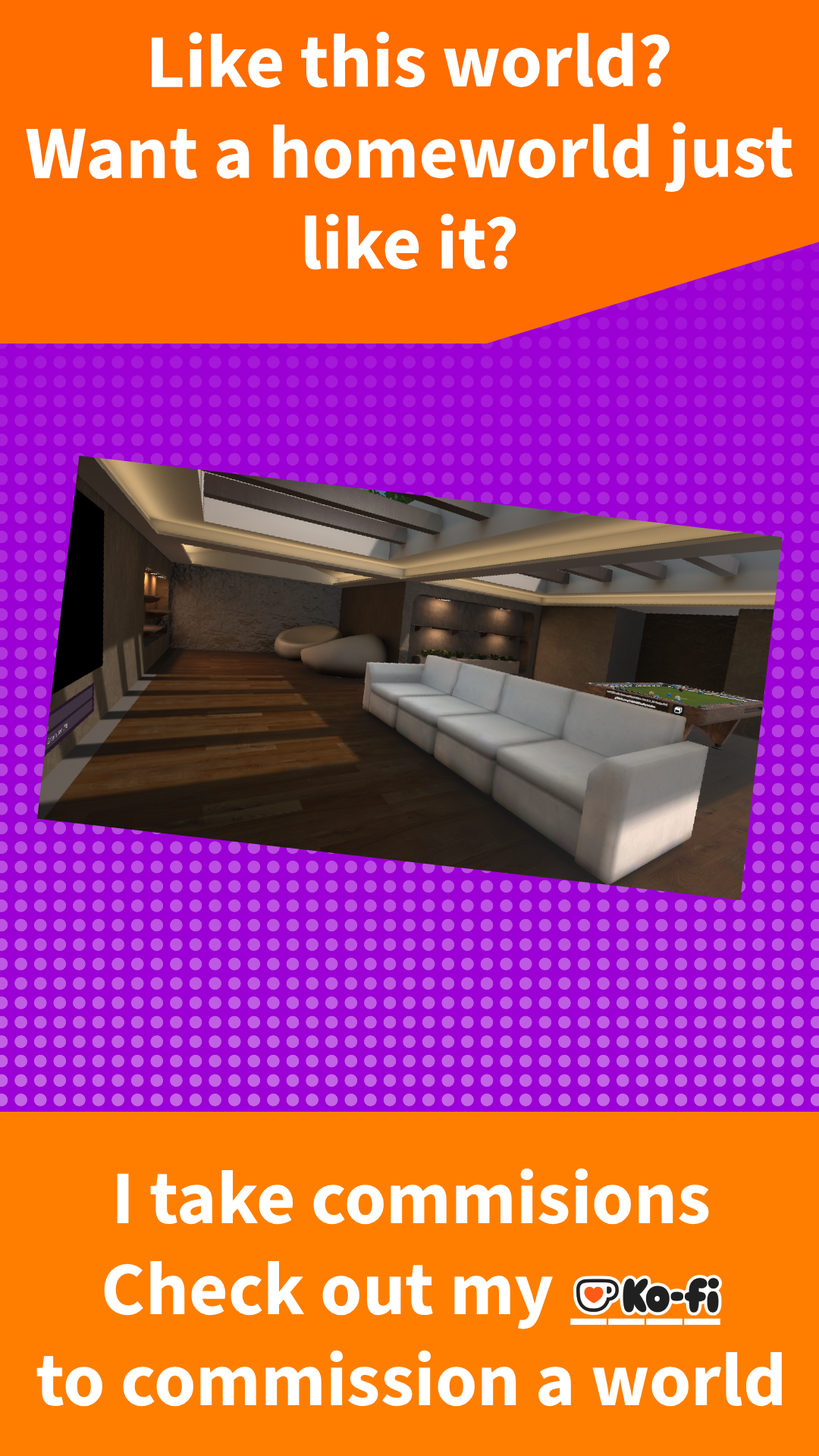
<style>
.page{position:relative;width:819px;height:1456px}
.page>*{position:absolute;margin:0}
.t1{font:75.8px "SourceSans3ExtraLight-Bold";color:#ffffff}
</style>
<div class="page">
<p class="t1" style="left:26px;top:31px;width:767px;height:239px;text-align:center">Like this world?<br>Want a homeworld just like it?</p>
<p class="t1" style="left:36px;top:1168px;width:746px;height:239px;text-align:center">I take commisions<br>Check out my ____<br>to commission a world</p>
</div>
